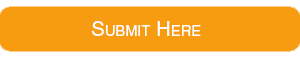
<style>
.page{position:relative;width:300px;height:58px;background:#f79c10}
.page>*{position:absolute;margin:0}
.t1{font:20.8px "HelveticaCE";color:#ffffff;font-variant:small-caps}
</style>
<div class="page">
<p class="t1" style="left:91px;top:21px;width:110px;height:15px">Submit Here</p>
</div>
